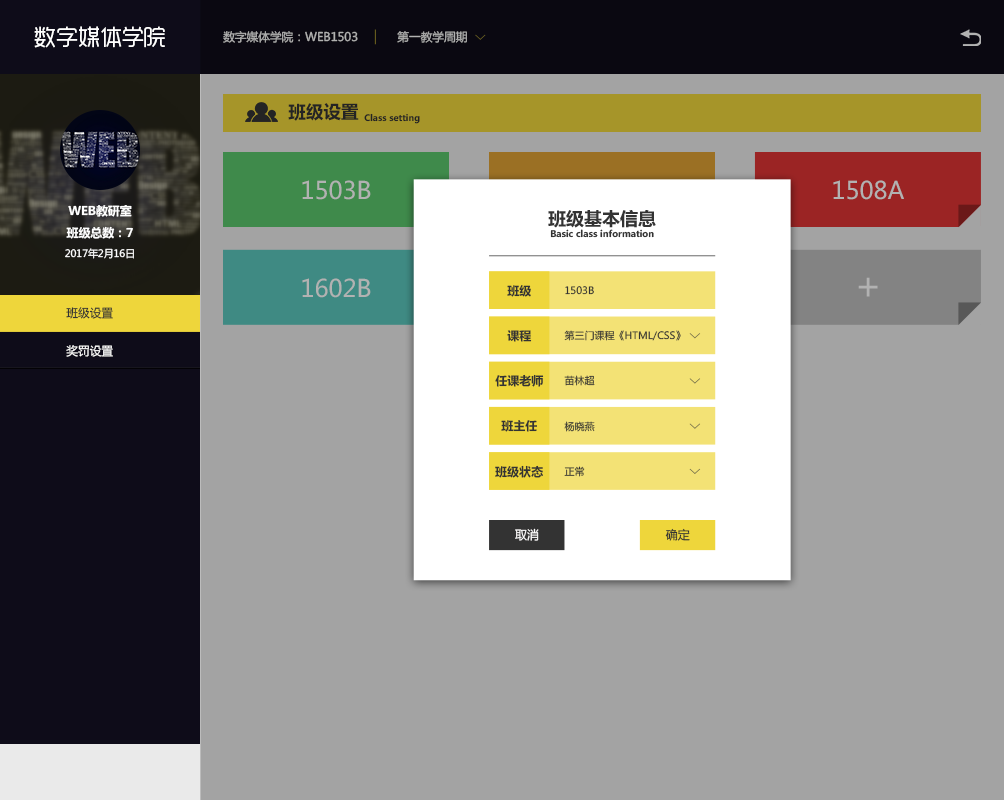
<style>
.page{position:relative;width:1004px;height:800px;background:#a3a3a3}
.page>*{position:absolute;margin:0}
.t1{font:22.1px "RTWSYueGoTrial-Regular";color:#ffffff}
.t2{font:11.8px "MicrosoftYaHei";color:#b2b2b2}
.t3{font:17.7px "MicrosoftYaHei-Bold";color:#333333}
.t4{font:8.9px "MicrosoftYaHei-Bold";color:#333333}
.t5{font:24px "MicrosoftYaHei";color:#b2b2b2}
.t6{font:12px "MicrosoftYaHei-Bold";color:#ffffff}
.t7{font:18px "MicrosoftYaHei-Bold";color:#333333}
.t8{font:9px "MicrosoftYaHei-Bold";color:#333333}
.t9{font:10px "MicrosoftYaHei";color:#ffffff}
.t10{font:37.6px "MicrosoftYaHei";color:#b2b2b2}
.t11{font:12px "MicrosoftYaHei-Bold";color:#333333}
.t12{font:10px "MicrosoftYaHei";color:#333333}
.t13{font:11.8px "MicrosoftYaHei";color:#333333}
.t14{font:11.8px "MicrosoftYaHei";color:#ffffff}
.t15{font:12px "MicrosoftYaHei";color:#fffefe}
.t16{font:12px "MicrosoftYaHei";color:#333333}
</style>
<div class="page">
<p class="t1" style="left:34px;top:26px;width:131px;height:22px">数字媒体学院</p>
<p class="t2" style="left:223px;top:31px;width:135px;height:12px">数字媒体学院：WEB1503</p>
<p class="t2" style="left:397px;top:31px;width:70px;height:12px">第一教学周期</p>
<p class="t3" style="left:288px;top:103px;width:71px;height:18px">班级设置</p>
<p class="t4" style="left:364px;top:113px;width:56px;height:11px">Class setting</p>
<p class="t5" style="left:302px;top:180px;width:69px;height:20px">1503B</p>
<p class="t5" style="left:833px;top:180px;width:71px;height:20px">1508A</p>
<p class="t6" style="left:68px;top:205px;width:64px;height:12px">WEB教研室</p>
<p class="t7" style="left:548px;top:210px;width:108px;height:18px">班级基本信息</p>
<p class="t6" style="left:66px;top:226px;width:67px;height:13px">班级总数：7</p>
<p class="t8" style="left:550px;top:229px;width:104px;height:9px">Basic class information</p>
<p class="t9" style="left:65px;top:248px;width:69px;height:11px">2017年2月16日</p>
<p class="t5" style="left:302px;top:278px;width:69px;height:20px">1602B</p>
<p class="t10" style="left:858px;top:277px;width:20px;height:20px">+</p>
<p class="t11" style="left:507px;top:285px;width:24px;height:12px">班级</p>
<p class="t12" style="left:565px;top:286px;width:29px;height:9px">1503B</p>
<p class="t13" style="left:66px;top:307px;width:47px;height:12px">班级设置</p>
<p class="t11" style="left:507px;top:330px;width:25px;height:12px">课程</p>
<p class="t12" style="left:564px;top:330px;width:117px;height:11px">第三门课程《HTML/CSS》</p>
<p class="t14" style="left:66px;top:345px;width:47px;height:12px">奖罚设置</p>
<p class="t11" style="left:495px;top:374px;width:49px;height:13px">任课老师</p>
<p class="t12" style="left:564px;top:375px;width:31px;height:11px">苗林超</p>
<p class="t11" style="left:501px;top:420px;width:36px;height:12px">班主任</p>
<p class="t12" style="left:564px;top:421px;width:31px;height:11px">杨晓燕</p>
<p class="t11" style="left:495px;top:465px;width:48px;height:13px">班级状态</p>
<p class="t12" style="left:564px;top:466px;width:21px;height:11px">正常</p>
<p class="t15" style="left:515px;top:528px;width:24px;height:13px">取消</p>
<p class="t16" style="left:665px;top:528px;width:25px;height:13px">确定</p>
</div>
